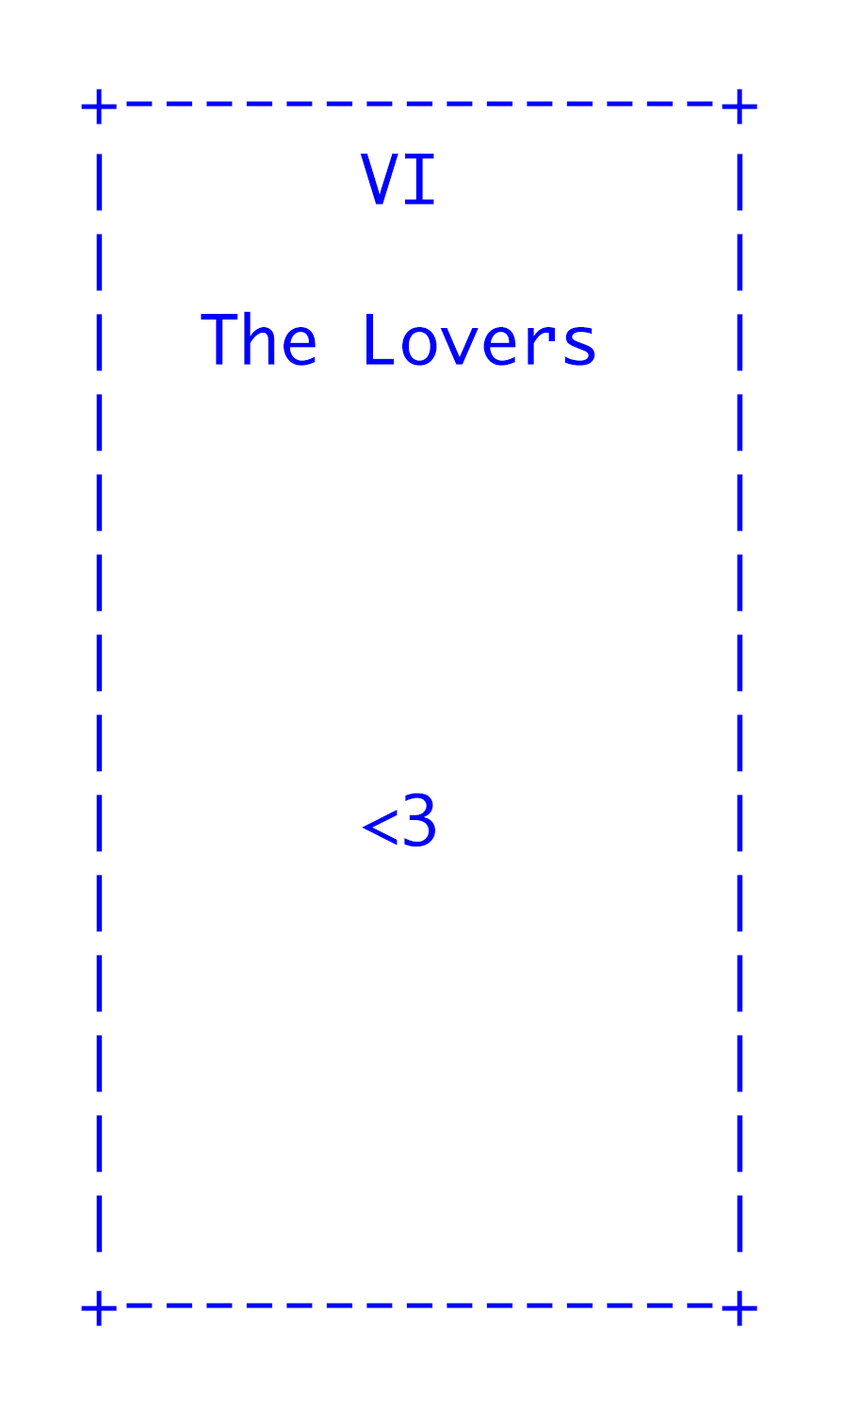
<style>
.page{position:relative;width:845px;height:1411px;background:#ffffff}
.page>*{position:absolute;margin:0}
.t1{font:66.7px "Monaco";color:#0000ff}
</style>
<div class="page">
<p class="t1" style="left:81px;top:89px;width:677px;height:1237px">+---------------+<br>│      VI       │<br>│               │<br>│  The Lovers   │<br>│               │<br>│               │<br>│               │<br>│               │<br>│               │<br>│      &lt;3       │<br>│               │<br>│               │ <br>│               │<br>│               │<br>│               │<br>+---------------+</p>
</div>
